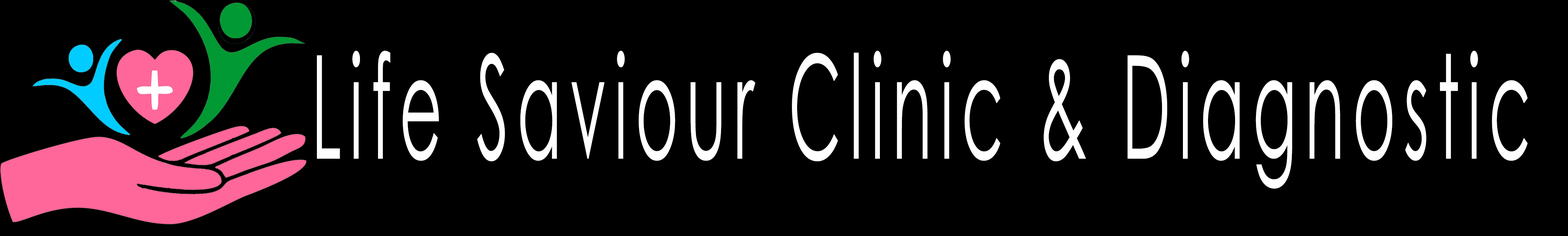
<style>
.page{position:relative;width:1568px;height:236px;background:#000000}
.page>*{position:absolute;margin:0}
.t1{font:143.3px "CenturyGothic";letter-spacing:0.1em;color:#ffffff;font-weight:bold;scale:0.45 1}
</style>
<div class="page">
<p class="t1" style="left:317px;top:51px;width:1211px;height:137px">Life Saviour Clinic &amp; Diagnostic</p>
</div>
